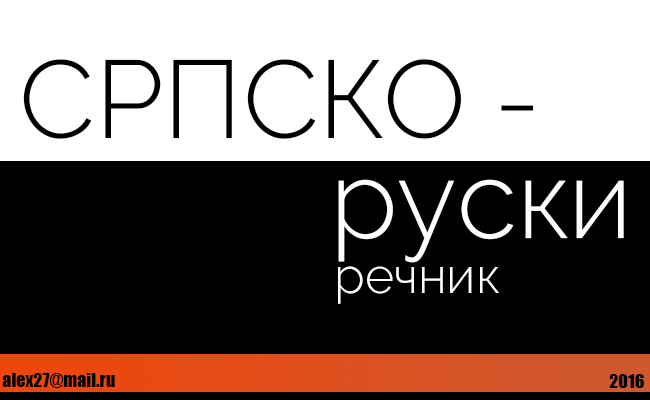
<style>
.page{position:relative;width:650px;height:400px;background:#000000}
.page>*{position:absolute;margin:0}
.t1{font:110px "Raleway-Light";color:#000000}
.t2{font:110px "Raleway-Light";color:#ffffff}
.t3{font:50px "Raleway-Light";color:#ffffff}
.t4{font:18px "Impact";color:#000000}
</style>
<div class="page">
<p class="t1" style="left:23px;top:59px;width:511px;height:80px">СРПСКО -</p>
<p class="t2" style="left:338px;top:179px;width:286px;height:84px">руски</p>
<p class="t3" style="left:338px;top:266px;width:161px;height:38px">речник</p>
<p class="t4" style="left:2px;top:373px;width:113px;height:15px">alex27@mail.ru</p>
<p class="t4" style="left:609px;top:374px;width:35px;height:14px">2016</p>
</div>
